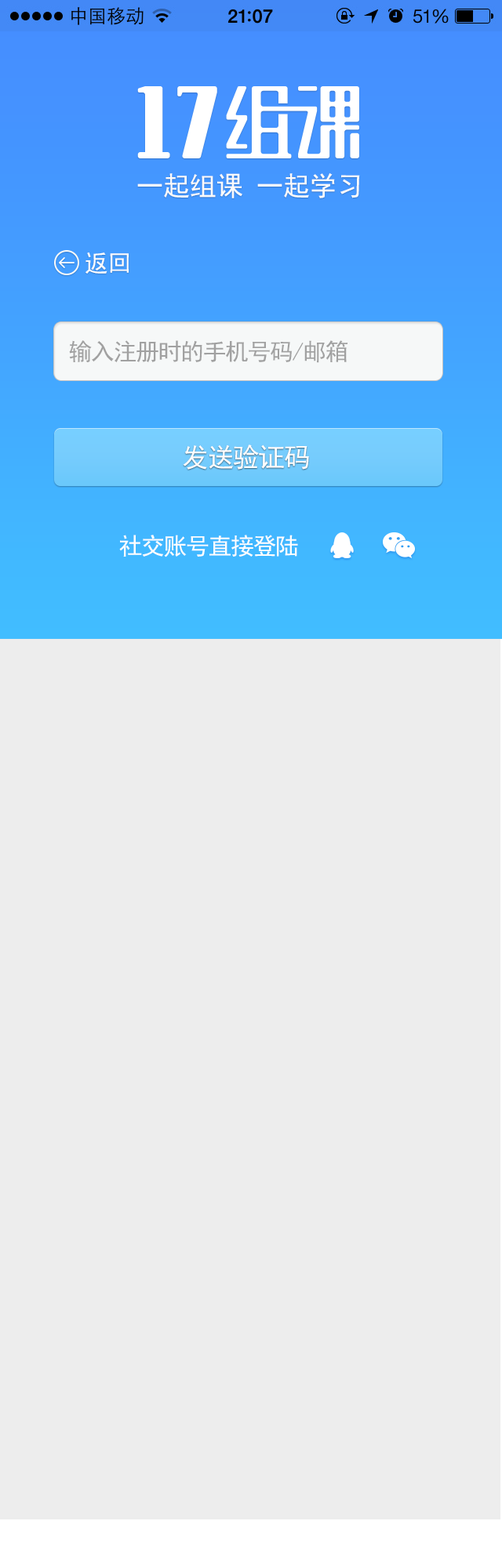
<style>
.page{position:relative;width:502px;height:1568px;background:#ededed}
.page>*{position:absolute;margin:0}
.t1{font:26.7px "SimHei";color:#fbfbfb}
.t2{font:23.5px "SimHei";color:#fefefe}
.t3{font:23.5px "SimHei";letter-spacing:-0.05em;color:#a1a1a1}
.t4{font:26.7px "SimHei";letter-spacing:-0.05em;color:#fefefe}
.t5{font:23.5px "SimHei";letter-spacing:-0.05em;color:#fefefe}
</style>
<div class="page">
<p class="t1" style="left:137px;top:172px;width:223px;height:26px">一起组课 一起学习</p>
<p class="t2" style="left:85px;top:252px;width:44px;height:22px">返回</p>
<p class="t3" style="left:69px;top:340px;width:278px;height:23px">输入注册时的手机号码/邮箱</p>
<p class="t4" style="left:183px;top:445px;width:126px;height:25px">发送验证码</p>
<p class="t5" style="left:119px;top:535px;width:179px;height:22px">社交账号直接登陆</p>
</div>
